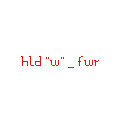
<style>
.page{position:relative;width:128px;height:128px;background:#ffffff}
.page>*{position:absolute;margin:0}
.t1{font:9px "Memoria";color:#f80b0b}
</style>
<div class="page">
<p class="t1" style="left:21px;top:56px;width:78px;height:12px">hld "w" _ fwr</p>
</div>
